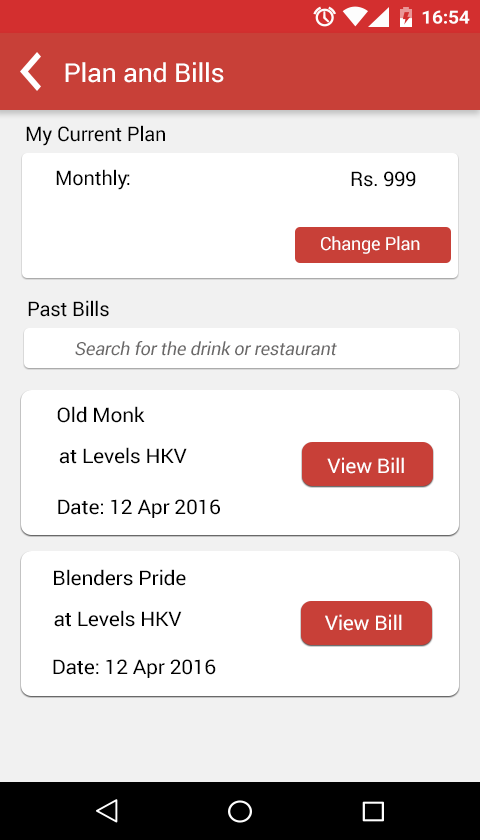
<style>
.page{position:relative;width:480px;height:840px;background:#ffffff}
.page>*{position:absolute;margin:0}
.t1{font:26.1px "Roboto-Regular";letter-spacing:-0.01em;color:#ffffff;scale:1.03 1}
.t2{font:20px "Roboto-Regular";letter-spacing:-0.01em;color:#000000}
.t3{font:18px "Roboto-Regular";letter-spacing:-0.01em;color:#ffffff}
.t4{font:18px "Roboto-Regular";letter-spacing:-0.01em;color:#6a6969;font-style:italic}
.t5{font:20px "Roboto-Regular";letter-spacing:-0.01em;color:#000000;scale:1.05 1}
.t6{font:20px "Roboto-Regular";letter-spacing:-0.01em;color:#ffffff;scale:1.05 1}
</style>
<div class="page">
<p class="t1" style="left:65px;top:62px;width:159px;height:21px">Plan and Bills</p>
<p class="t2" style="left:26px;top:125px;width:139px;height:21px">My Current Plan</p>
<p class="t2" style="left:56px;top:169px;width:74px;height:21px">Monthly:</p>
<p class="t2" style="left:351px;top:171px;width:65px;height:16px">Rs. 999</p>
<p class="t3" style="left:321px;top:236px;width:99px;height:18px">Change Plan</p>
<p class="t2" style="left:28px;top:300px;width:81px;height:17px">Past Bills</p>
<p class="t4" style="left:75px;top:341px;width:262px;height:15px">Search for the drink or restaurant</p>
<p class="t5" style="left:57px;top:406px;width:88px;height:17px">Old Monk</p>
<p class="t5" style="left:59px;top:447px;width:128px;height:17px">at Levels HKV</p>
<p class="t6" style="left:327px;top:457px;width:77px;height:17px">View Bill</p>
<p class="t5" style="left:58px;top:499px;width:162px;height:19px">Date: 12 Apr 2016</p>
<p class="t5" style="left:54px;top:569px;width:132px;height:17px">Blenders Pride</p>
<p class="t5" style="left:54px;top:610px;width:128px;height:17px">at Levels HKV</p>
<p class="t6" style="left:325px;top:614px;width:77px;height:17px">View Bill</p>
<p class="t5" style="left:53px;top:659px;width:163px;height:19px">Date: 12 Apr 2016</p>
</div>
